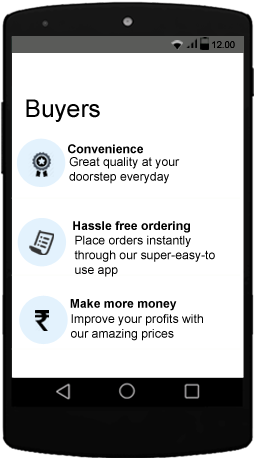
<style>
.page{position:relative;width:256px;height:460px;background:#ffffff}
.page>*{position:absolute;margin:0}
.t1{font:9.5px "ArialMT";color:#000000}
.t2{font:24.5px "ArialMT";color:#000000}
.t3{font:12.2px "Arial-BoldMT";color:#000000}
.t4{font:12.2px "ArialMT";color:#000000}
</style>
<div class="page">
<p class="t1" style="left:212px;top:41px;width:23px;height:7px">12.00</p>
<p class="t2" style="left:26px;top:99px;width:74px;height:23px">Buyers</p>
<p class="t3" style="left:68px;top:144px;width:75px;height:10px">Convenience</p>
<p class="t4" style="left:69px;top:157px;width:111px;height:27px">Great quality at your <br>doorstep everyday</p>
<p class="t3" style="left:73px;top:221px;width:117px;height:12px">Hassle free ordering</p>
<p class="t4" style="left:74px;top:235px;width:141px;height:42px">Place orders instantly through our super-easy-to use app</p>
<p class="t3" style="left:70px;top:299px;width:107px;height:12px">Make more money</p>
<p class="t4" style="left:71px;top:314px;width:132px;height:27px">Improve your profits with our amazing prices</p>
</div>
